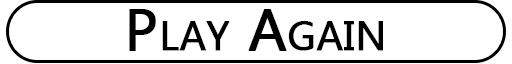
<style>
.page{position:relative;width:512px;height:64px;background:#ffffff}
.page>*{position:absolute;margin:0}
.t1{font:58.3px "Ebrima";color:#000000;font-variant:small-caps;font-weight:bold}
</style>
<div class="page">
<p class="t1" style="left:129px;top:9px;width:254px;height:42px">Play Again</p>
</div>
